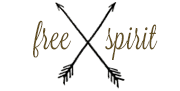
<style>
.page{position:relative;width:180px;height:91px;background:#ffffff}
.page>*{position:absolute;margin:0}
.t1{font:36px "Lavanderia-Regular";letter-spacing:0.015em;color:#635023}
</style>
<div class="page">
<p class="t1" style="left:33px;top:20px;width:125px;height:40px">free     spirit</p>
</div>
